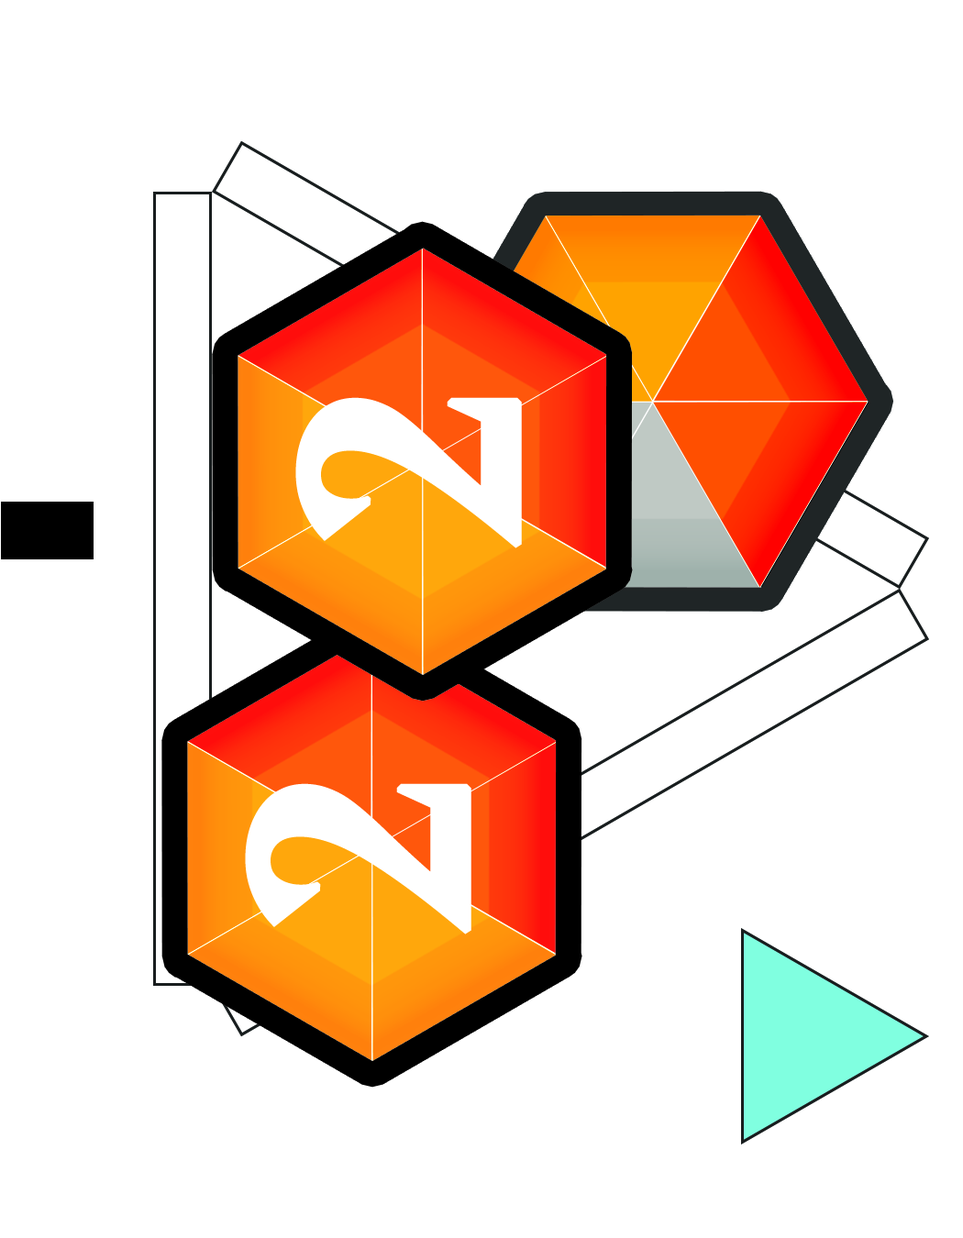
<style>
.page{position:relative;width:963px;height:1238px;background:#ffffff}
.page>*{position:absolute;margin:0}
.t1{font:306px "Beleren-Bold";letter-spacing:0.04em;color:#ffffff;font-weight:bold}
</style>
<div class="page">
<p class="t1" style="left:245px;top:783px;width:226px;height:152px;rotate:-90deg">2</p>
</div>
